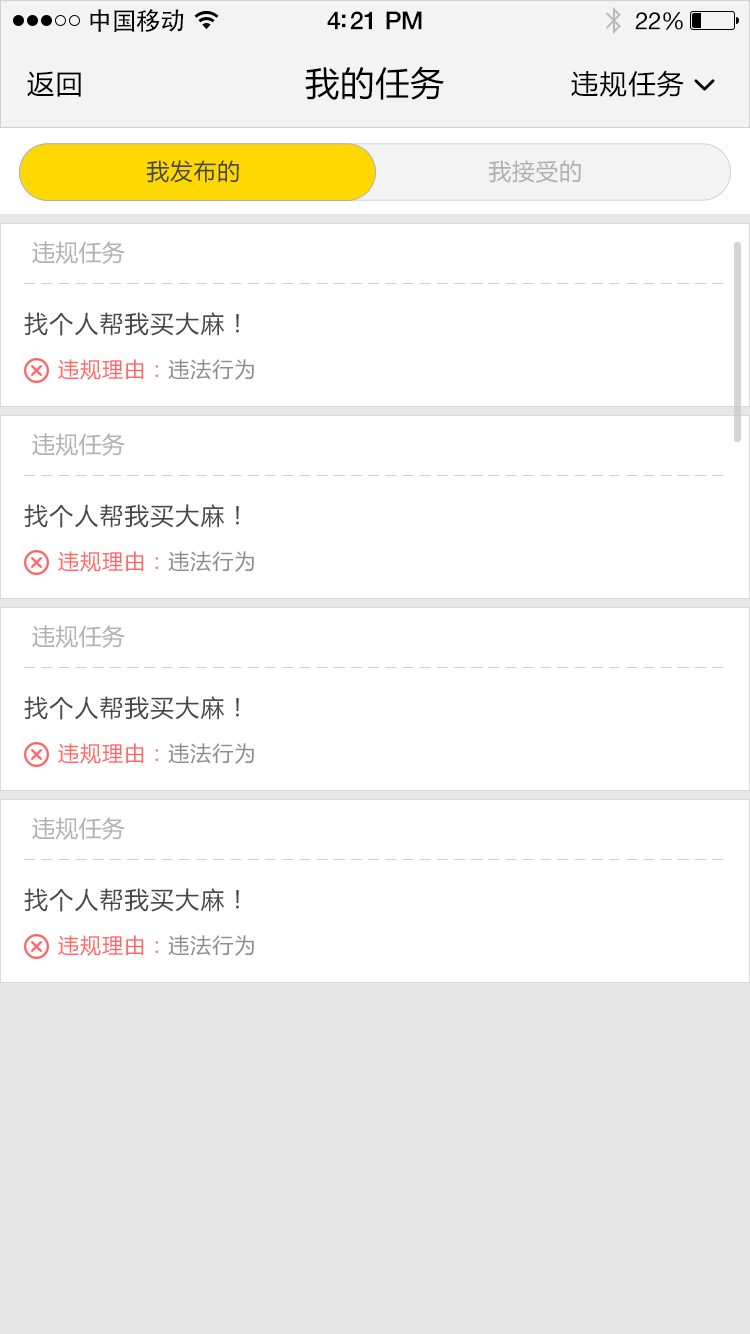
<style>
.page{position:relative;width:750px;height:1334px;background:#ffffff}
.page>*{position:absolute;margin:0}
.t1{font:25px "AdobeHeitiStd-Regular";letter-spacing:-0.025em;color:#000000}
.t2{font:25px "HelveticaNeue-Medium";letter-spacing:-0.02em;color:#000000}
.t3{font:24px "HelveticaNeue";letter-spacing:-0.02em;color:#000000}
.t4{font:27px "MicrosoftYaHei";letter-spacing:0.05em;color:#000000}
.t5{font:34px "MicrosoftYaHei";letter-spacing:0.03em;color:#000000}
.t6{font:23px "MicrosoftYaHei";letter-spacing:0.03em;color:#484848}
.t7{font:23px "MicrosoftYaHei";letter-spacing:0.03em;color:#b0b0b0}
.t8{font:23px "MicrosoftYaHei";letter-spacing:0.01em;color:#b0b0b0}
.t9{font:24px "MicrosoftYaHei";letter-spacing:0.05em;color:#555555}
.t10{font:21px "MicrosoftYaHei";letter-spacing:0.05em;color:#ff6666}
.t11{font:21px "MicrosoftYaHei";letter-spacing:0.05em;color:#8e8e8e}
</style>
<div class="page">
<p class="t1" style="left:90px;top:9px;width:94px;height:23px">中国移动</p>
<p class="t2" style="left:327px;top:11px;width:95px;height:19px">4:21 PM</p>
<p class="t3" style="left:635px;top:12px;width:48px;height:18px">22%</p>
<p class="t4" style="left:27px;top:71px;width:54px;height:26px">返回</p>
<p class="t5" style="left:305px;top:66px;width:139px;height:34px">我的任务</p>
<p class="t4" style="left:571px;top:70px;width:113px;height:27px">违规任务</p>
<p class="t6" style="left:146px;top:160px;width:93px;height:23px">我发布的</p>
<p class="t7" style="left:488px;top:160px;width:93px;height:23px">我接受的</p>
<p class="t8" style="left:32px;top:241px;width:93px;height:23px">违规任务</p>
<p class="t9" style="left:24px;top:312px;width:215px;height:24px">找个人帮我买大麻！</p>
<p class="t10" style="left:58px;top:359px;width:196px;height:21px">违规理由：<span class="t11">违法行为</span></p>
<p class="t8" style="left:32px;top:433px;width:93px;height:23px">违规任务</p>
<p class="t9" style="left:24px;top:504px;width:215px;height:24px">找个人帮我买大麻！</p>
<p class="t10" style="left:58px;top:551px;width:196px;height:21px">违规理由：<span class="t11">违法行为</span></p>
<p class="t8" style="left:32px;top:625px;width:93px;height:23px">违规任务</p>
<p class="t9" style="left:24px;top:696px;width:215px;height:24px">找个人帮我买大麻！</p>
<p class="t10" style="left:58px;top:743px;width:196px;height:21px">违规理由：<span class="t11">违法行为</span></p>
<p class="t8" style="left:32px;top:817px;width:93px;height:23px">违规任务</p>
<p class="t9" style="left:24px;top:888px;width:215px;height:24px">找个人帮我买大麻！</p>
<p class="t10" style="left:58px;top:935px;width:196px;height:21px">违规理由：<span class="t11">违法行为</span></p>
</div>
